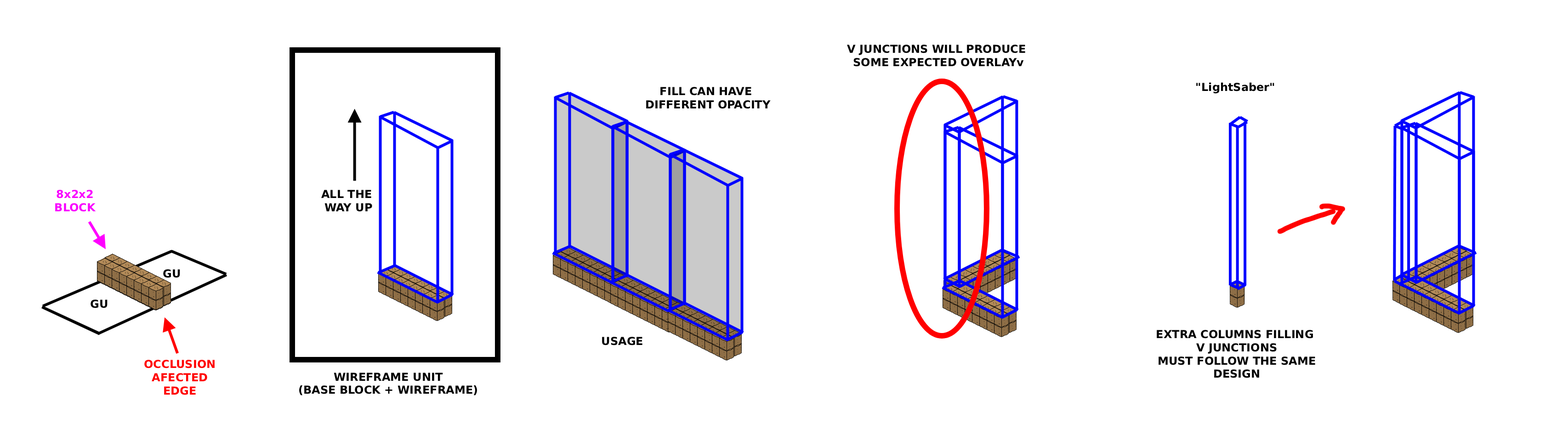
<style>
.page{position:relative;width:1568px;height:424px;background:#ffffff}
.page>*{position:absolute;margin:0}
.t1{font:11px "DejaVuSans-Bold";color:#000000}
.t2{font:11px "DejaVuSans-Bold";color:#f900ff}
.t3{font:11px "DejaVuSans-Bold";color:#ff0000}
</style>
<div class="page">
<p class="t1" style="left:847px;top:45px;width:178px;height:22px;text-align:center">V JUNCTIONS WILL PRODUCE <br>SOME EXPECTED OVERLAYv</p>
<p class="t1" style="left:646px;top:87px;width:125px;height:22px;text-align:center">FILL CAN HAVE <br>DIFFERENT OPACITY</p>
<p class="t1" style="left:1196px;top:82px;width:78px;height:12px">"LightSaber"</p>
<p class="t2" style="left:55px;top:190px;width:41px;height:22px;text-align:center">8x2x2<br>BLOCK</p>
<p class="t1" style="left:321px;top:190px;width:51px;height:22px;text-align:center">ALL THE <br>WAY UP</p>
<p class="t1" style="left:163px;top:269px;width:17px;height:9px">GU</p>
<p class="t1" style="left:91px;top:300px;width:17px;height:8px">GU</p>
<p class="t1" style="left:1157px;top:330px;width:158px;height:48px;text-align:center">EXTRA COLUMNS FILLING <br>V JUNCTIONS<br>MUST FOLLOW THE SAME<br>DESIGN</p>
<p class="t1" style="left:602px;top:337px;width:40px;height:9px">USAGE</p>
<p class="t3" style="left:144px;top:360px;width:71px;height:35px;text-align:center">OCCLUSION<br>AFECTED<br>EDGE</p>
<p class="t1" style="left:299px;top:373px;width:178px;height:23px;text-align:center">WIREFRAME UNIT<br>(BASE BLOCK + WIREFRAME)</p>
</div>
